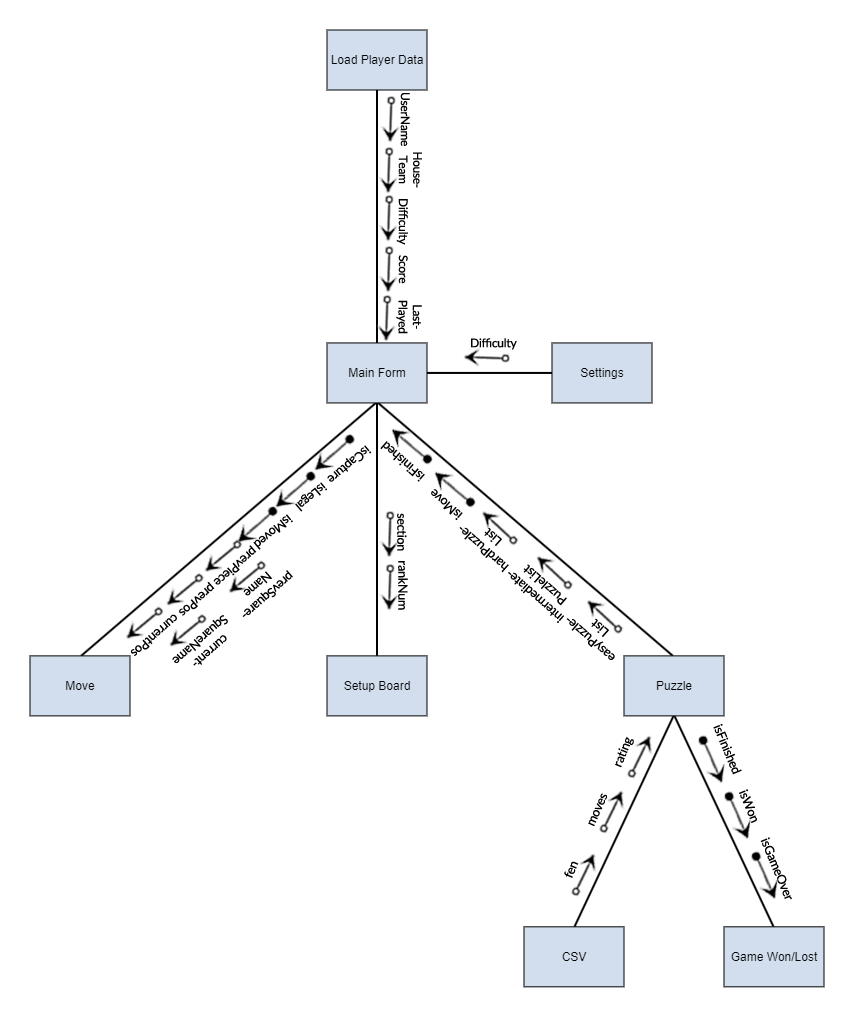
<style>
.page{position:relative;width:854px;height:1017px;background:#ffffff}
.page>*{position:absolute;margin:0}
.t1{font:12px "Lato-Regular";letter-spacing:-0.025em;color:#000000}
.t2{font:12.6px "Lato-Regular";letter-spacing:-0.025em;color:#000000}
</style>
<div class="page">
<p class="t1" style="left:400px;top:93px;width:10px;height:53px;rotate:90deg">UserName</p>
<p class="t1" style="left:398px;top:152px;width:24px;height:36px;text-align:center;rotate:90deg">House-<br>Team</p>
<p class="t1" style="left:396px;top:199px;width:12px;height:46px;rotate:90deg">Difficulty</p>
<p class="t1" style="left:398px;top:255px;width:10px;height:29px;rotate:90deg">Score</p>
<p class="t1" style="left:396px;top:300px;width:26px;height:34px;text-align:center;rotate:90deg">Last-<br>Played</p>
<p class="t1" style="left:471px;top:338px;width:46px;height:12px">Difficulty</p>
<p class="t2" style="left:327px;top:445px;width:44px;height:37px;rotate:140deg">isCapture</p>
<p class="t2" style="left:380px;top:441px;width:45px;height:41px;rotate:-139deg">isFinished</p>
<p class="t2" style="left:295px;top:482px;width:32px;height:30px;rotate:140deg">isLegal</p>
<p class="t2" style="left:431px;top:489px;width:32px;height:31px;rotate:-139deg">isMove</p>
<p class="t2" style="left:253px;top:514px;width:40px;height:36px;rotate:140deg">isMoved</p>
<p class="t2" style="left:397px;top:513px;width:10px;height:38px;rotate:90deg">section</p>
<p class="t2" style="left:459px;top:527px;width:50px;height:46px;text-align:center;rotate:-139deg">hardPuzzle-<br>List</p>
<p class="t2" style="left:213px;top:545px;width:44px;height:40px;rotate:139deg">prevPiece</p>
<p class="t2" style="left:398px;top:561px;width:10px;height:49px;rotate:90deg">rankNum</p>
<p class="t2" style="left:508px;top:564px;width:59px;height:59px;text-align:center;rotate:-139deg">intermediate-<br>PuzzleList</p>
<p class="t2" style="left:179px;top:581px;width:36px;height:35px;rotate:139deg">prevPos</p>
<p class="t2" style="left:242px;top:570px;width:51px;height:47px;text-align:center;rotate:139deg">prevSquare-<br>Name</p>
<p class="t2" style="left:131px;top:614px;width:46px;height:42px;rotate:139deg">currentPos</p>
<p class="t2" style="left:172px;top:615px;width:56px;height:51px;text-align:center;rotate:139deg">current-<br>SquareName</p>
<p class="t2" style="left:566px;top:618px;width:49px;height:42px;text-align:center;rotate:-139deg">easyPuzzle-<br>List</p>
<p class="t2" style="left:713px;top:724px;width:29px;height:51px;rotate:67deg">isFinished</p>
<p class="t2" style="left:615px;top:736px;width:19px;height:32px;rotate:-68deg">rating</p>
<p class="t2" style="left:588px;top:793px;width:20px;height:34px;rotate:-66deg">moves</p>
<p class="t2" style="left:739px;top:789px;width:18px;height:34px;rotate:67deg">isWon</p>
<p class="t2" style="left:760px;top:837px;width:32px;height:63px;rotate:67deg">isGameOver</p>
<p class="t2" style="left:564px;top:861px;width:15px;height:17px;rotate:-68deg">fen</p>
</div>
